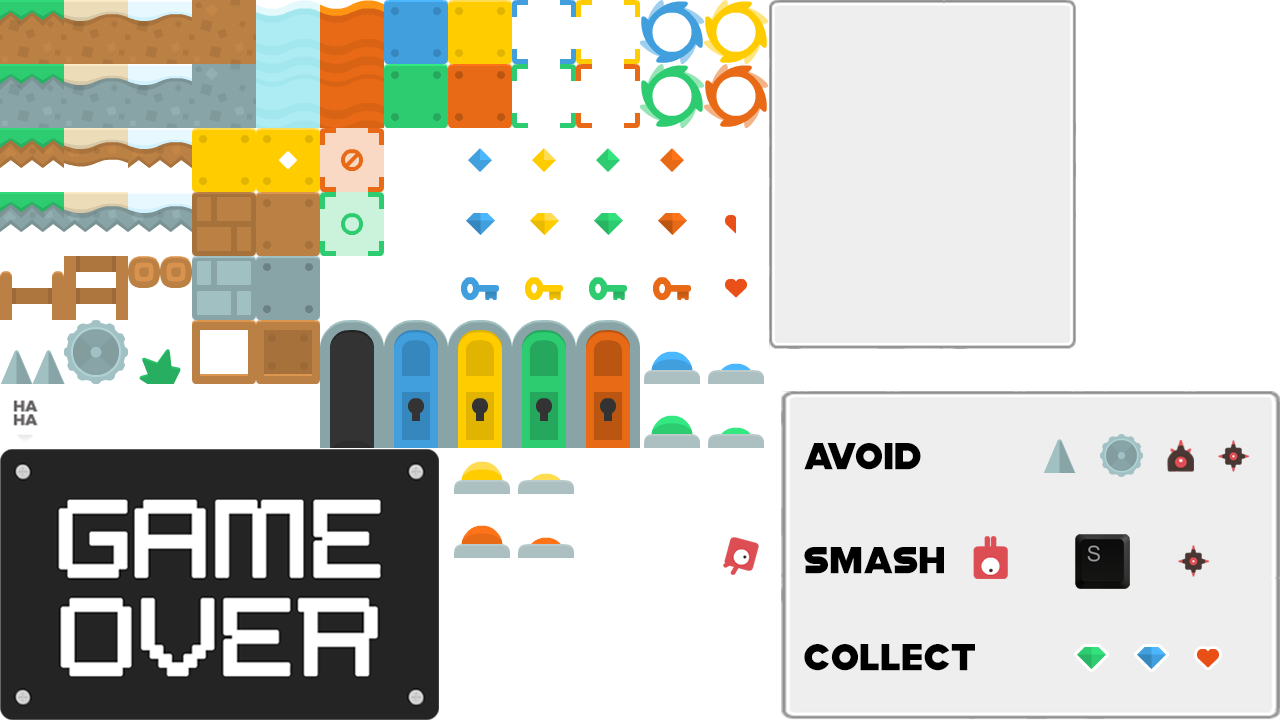
<style>
.page{position:relative;width:1280px;height:720px;background:#ffffff}
.page>*{position:absolute;margin:0}
.t1{font:37.5px "ModiaNonCommercialRegular";color:#000000}
</style>
<div class="page">
<p class="t1" style="left:804px;top:443px;width:117px;height:27px">Avoid</p>
<p class="t1" style="left:804px;top:547px;width:140px;height:27px">smash</p>
<p class="t1" style="left:804px;top:644px;width:171px;height:27px">Collect</p>
</div>
